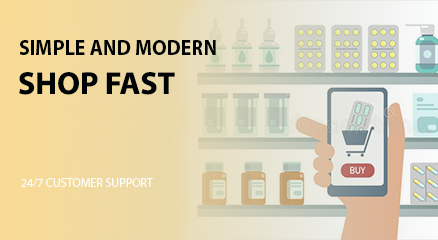
<style>
.page{position:relative;width:438px;height:240px}
.page>*{position:absolute;margin:0}
.t1{font:21.7px "MyriadPro-Bold";color:#000203;text-transform:uppercase;scale:0.93 1}
.t2{font:31.8px "MyriadPro-Bold";color:#000406;text-transform:uppercase}
.t3{font:12.1px "MyriadPro-Regular";color:#fbfcfd;text-transform:uppercase}
</style>
<div class="page">
<p class="t1" style="left:19px;top:40px;width:197px;height:15px">simple and modern</p>
<p class="t2" style="left:19px;top:72px;width:156px;height:23px">Shop fast</p>
<p class="t3" style="left:21px;top:178px;width:132px;height:9px">24/7 customer support</p>
</div>
